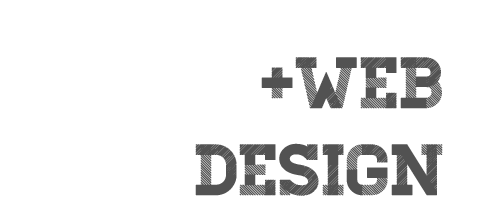
<style>
.page{position:relative;width:504px;height:216px;background:#ffffff}
.page>*{position:absolute;margin:0}
.t1{font:72px "Homestead-Display";color:#525252}
</style>
<div class="page">
<p class="t1" style="left:195px;top:57px;width:248px;height:139px;text-align:right">+WEB<br>DESIGN</p>
</div>
